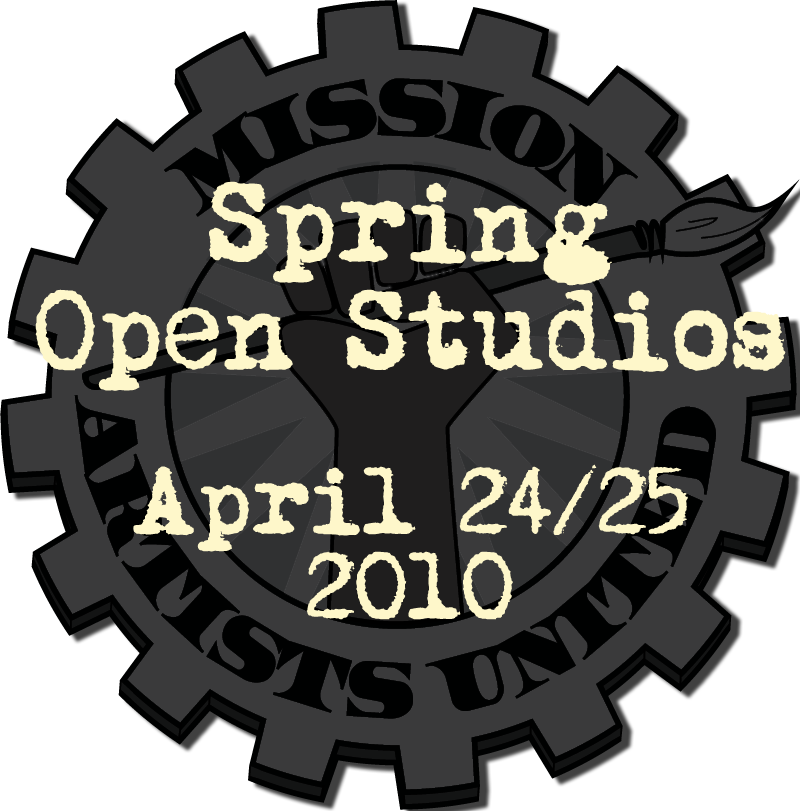
<style>
.page{position:relative;width:800px;height:811px;background:#3a3a3b}
.page>*{position:absolute;margin:0}
.t1{font:100px/108px "MomsTypewriter";color:#fef7ca}
.t2{font:84px "MomsTypewriter";color:#fef7ca}
</style>
<div class="page">
<p class="t1" style="left:35px;top:181px;width:751px;height:210px;text-align:center">Spring<br>Open Studios</p>
<p class="t2" style="left:133px;top:464px;width:555px;height:88px">April 24/25</p>
<p class="t2" style="left:306px;top:551px;width:207px;height:69px">2OlO</p>
</div>
